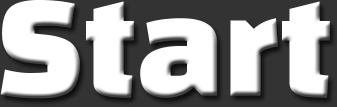
<style>
.page{position:relative;width:337px;height:107px;background:#ffffff}
.page>*{position:absolute;margin:0}
.t1{font:150px "ChangaOne";color:#ffffff}
</style>
<div class="page">
<p class="t1" style="left:0px;top:0px;width:330px;height:99px">Start</p>
</div>
